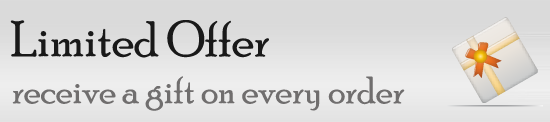
<style>
.page{position:relative;width:550px;height:122px}
.page>*{position:absolute;margin:0}
.t1{font:50px "PoorRichard-Regular";color:#191919}
.t2{font:38px "PoorRichard-Regular";color:#706e6e}
</style>
<div class="page">
<p class="t1" style="left:10px;top:20px;width:259px;height:38px">Limited Offer</p>
<p class="t2" style="left:12px;top:76px;width:393px;height:35px">receive a gift on every order</p>
</div>
